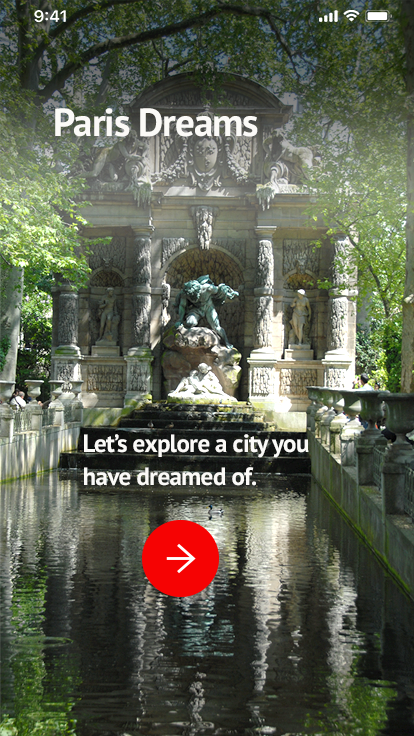
<style>
.page{position:relative;width:414px;height:736px}
.page>*{position:absolute;margin:0}
.t1{font:38.9px "PTSans-Bold";letter-spacing:-0.024em;color:#fbfaf7}
.t2{font:25px/33.3px "PTSans-Bold";letter-spacing:-0.024em;color:#fbfaf7}
</style>
<div class="page">
<p class="t1" style="left:55px;top:108px;width:203px;height:29px">Paris Dreams</p>
<p class="t2" style="left:84px;top:434px;width:225px;height:52px">Let’s explore a city you<br>have dreamed of.</p>
</div>
